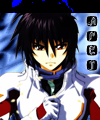
<style>
.page{position:relative;width:100px;height:120px}
.page>*{position:absolute;margin:0}
.t1{font:12px "HauntedBricks";color:#000000}
</style>
<div class="page">
<p class="t1" style="left:86px;top:2px;width:12px;height:69px">K<br>A<br>F<br>E<br>J</p>
</div>
